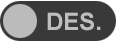
<style>
.page{position:relative;width:116px;height:41px;background:#393939}
.page>*{position:absolute;margin:0}
.t1{font:24px "Arial-BoldMT";color:#bebebe}
</style>
<div class="page">
<p class="t1" style="left:47px;top:12px;width:54px;height:19px">DES.</p>
</div>
